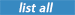
<style>
.page{position:relative;width:75px;height:15px;background:#3789c1}
.page>*{position:absolute;margin:0}
.t1{font:18px "MyriadArabic-Regular";color:#ffffff;font-weight:bold;font-style:italic}
</style>
<div class="page">
<p class="t1" style="left:19px;top:2px;width:34px;height:11px">list all</p>
</div>
